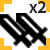
<style>
.page{position:relative;width:50px;height:50px;background:#ffffff}
.page>*{position:absolute;margin:0}
.t1{font:15.8px "NotoSansKR-Bold";color:#25242a}
</style>
<div class="page">
<p class="t1" style="left:29px;top:1px;width:17px;height:12px">x2</p>
</div>
